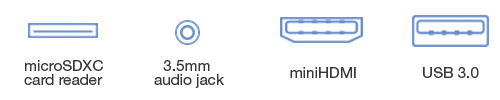
<style>
.page{position:relative;width:500px;height:100px;background:#ffffff}
.page>*{position:absolute;margin:0}
.t1{font:15.3px/13.9px "HelveticaNeue-Roman";color:#393939}
.t2{font:15.3px "HelveticaNeue-Roman";color:#393939}
</style>
<div class="page">
<p class="t1" style="left:24px;top:60px;width:79px;height:25px;text-align:right">microSDXC<br>card reader</p>
<p class="t1" style="left:154px;top:60px;width:70px;height:28px;text-align:center">3.5mm <br>audio jack</p>
<p class="t2" style="left:290px;top:67px;width:66px;height:11px">miniHDMI</p>
<p class="t2" style="left:423px;top:67px;width:56px;height:11px">USB 3.0</p>
</div>
